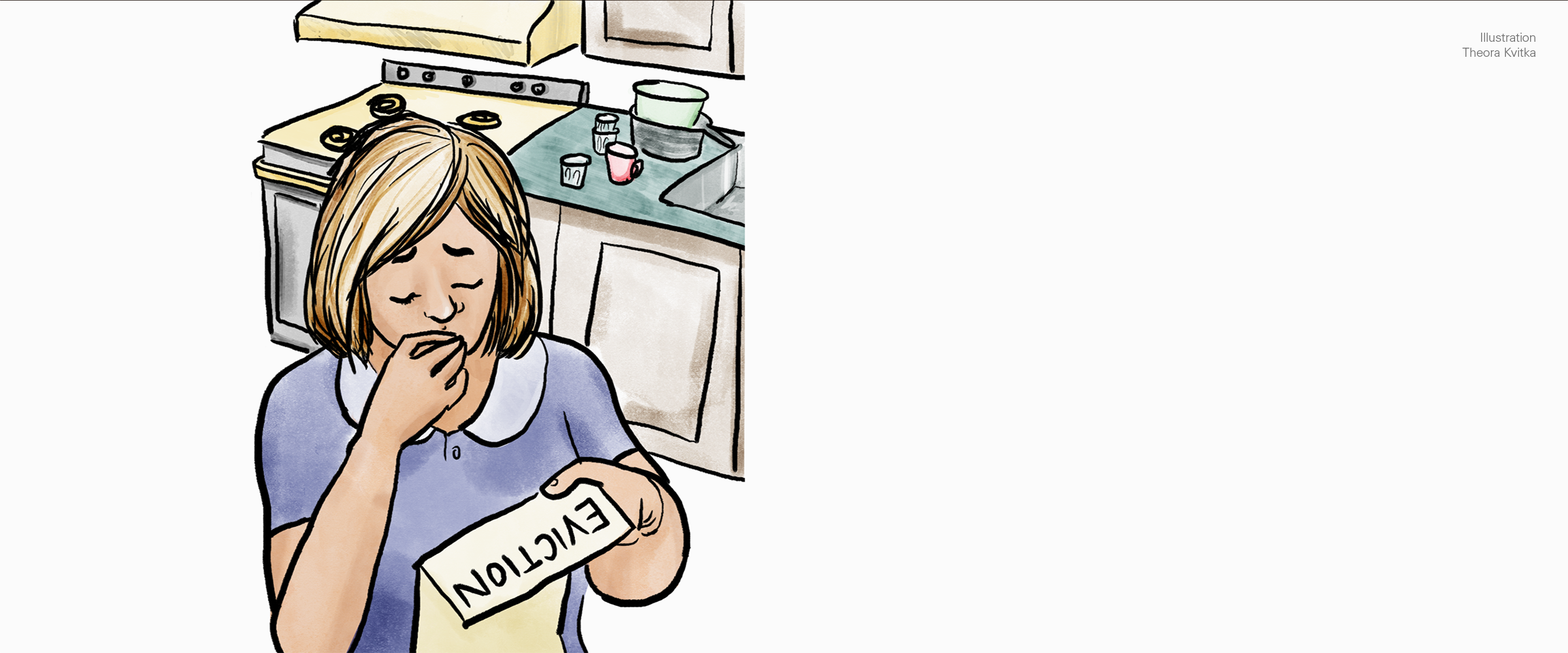
<style>
.page{position:relative;width:1568px;height:653px;background:#fbfbfb}
.page>*{position:absolute;margin:0}
.t1{font:12.6px "UniversLTStd-Light";color:#717171}
</style>
<div class="page">
<p class="t1" style="left:1462px;top:33px;width:74px;height:24px;text-align:right">Illustration<br>Theora Kvitka</p>
</div>
